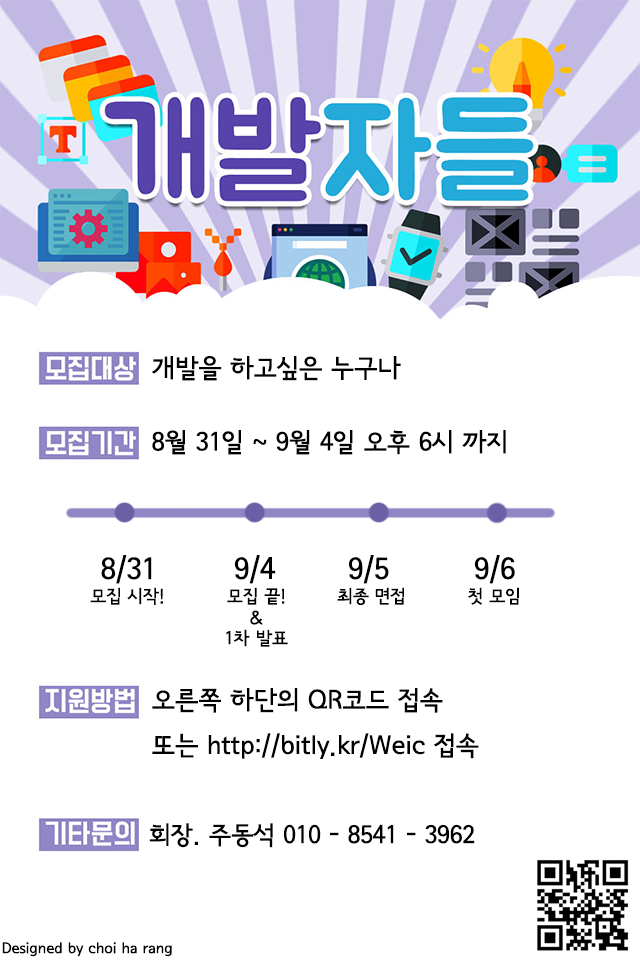
<style>
.page{position:relative;width:640px;height:960px;background:#ffffff}
.page>*{position:absolute;margin:0}
.t1{font:25.9px "SeoulNamsanB";color:#000000}
.t2{font:30px "SeoulNamsanB";color:#000000}
.t3{font:18px "SeoulNamsanB";color:#000000}
.t4{font:25px "SeoulNamsanB";color:#000000}
.t5{font:15px "SeoulNamsanB";color:#000000}
</style>
<div class="page">
<p class="t1" style="left:152px;top:355px;width:249px;height:26px">개발을 하고싶은 누구나</p>
<p class="t1" style="left:152px;top:430px;width:354px;height:25px">8월 31일 ~ 9월 4일 오후 6시 까지</p>
<p class="t2" style="left:101px;top:555px;width:51px;height:29px">8/31</p>
<p class="t2" style="left:234px;top:555px;width:42px;height:29px">9/4</p>
<p class="t2" style="left:348px;top:555px;width:41px;height:29px">9/5</p>
<p class="t2" style="left:474px;top:555px;width:41px;height:29px">9/6</p>
<p class="t3" style="left:90px;top:587px;width:73px;height:18px">모집 시작!</p>
<p class="t3" style="left:227px;top:587px;width:58px;height:18px">모집 끝!</p>
<p class="t3" style="left:337px;top:587px;width:67px;height:19px">최종 면접</p>
<p class="t3" style="left:468px;top:587px;width:51px;height:18px">첫 모임</p>
<p class="t3" style="left:250px;top:610px;width:13px;height:15px">&amp;</p>
<p class="t3" style="left:226px;top:629px;width:62px;height:18px">1차 발표</p>
<p class="t1" style="left:152px;top:688px;width:327px;height:71px">오른쪽 하단의 QR코드 접속<br>또는 http://bitly.kr/Weic 접속</p>
<p class="t4" style="left:149px;top:823px;width:326px;height:25px">회장. 주동석 010 - 8541 - 3962</p>
<p class="t5" style="left:2px;top:942px;width:170px;height:15px">Designed by choi ha rang</p>
</div>
